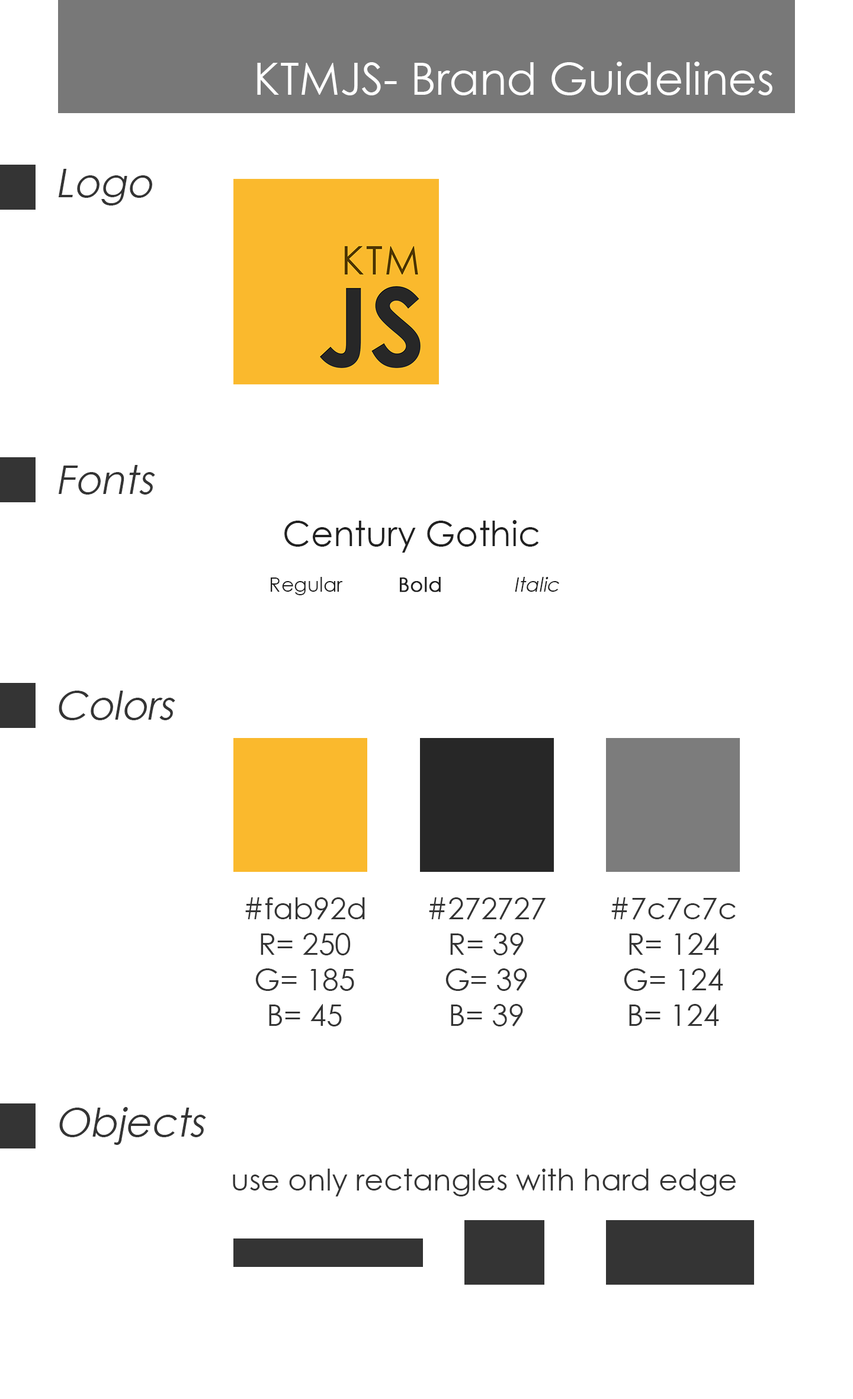
<style>
.page{position:relative;width:853px;height:1399px;background:#ffffff}
.page>*{position:absolute;margin:0}
.t1{font:44.4px "CenturyGothic";color:#ffffff}
.t2{font:39.5px "CenturyGothic";color:#343434;font-style:italic}
.t3{font:34.5px "CenturyGothic";color:#212121}
.t4{font:19.7px "CenturyGothic";color:#212121}
.t5{font:19.7px "CenturyGothic";color:#212121;font-weight:bold}
.t6{font:19.7px "CenturyGothic";color:#212121;font-style:italic}
.t7{font:29.6px "CenturyGothic";color:#343434}
</style>
<div class="page">
<p class="t1" style="left:257px;top:62px;width:515px;height:33px">KTMJS- Brand Guidelines</p>
<p class="t2" style="left:58px;top:169px;width:94px;height:36px">Logo</p>
<p class="t2" style="left:59px;top:465px;width:96px;height:29px">Fonts</p>
<p class="t3" style="left:284px;top:520px;width:255px;height:32px">Century Gothic</p>
<p class="t4" style="left:271px;top:577px;width:72px;height:18px">Regular</p>
<p class="t5" style="left:400px;top:577px;width:41px;height:15px">Bold</p>
<p class="t6" style="left:515px;top:577px;width:44px;height:15px">Italic</p>
<p class="t2" style="left:59px;top:690px;width:116px;height:30px">Colors</p>
<p class="t7" style="left:245px;top:897px;width:120px;height:129px;text-align:center">#fab92d<br>R= 250<br>G= 185<br>B= 45</p>
<p class="t7" style="left:429px;top:897px;width:117px;height:129px;text-align:center">#272727<br>R= 39<br>G= 39<br>B= 39</p>
<p class="t7" style="left:611px;top:897px;width:124px;height:129px;text-align:center">#7c7c7c<br>R= 124<br>G= 124<br>B= 124</p>
<p class="t2" style="left:59px;top:1107px;width:147px;height:38px">Objects</p>
<p class="t7" style="left:233px;top:1168px;width:502px;height:28px">use only rectangles with hard edge</p>
</div>
